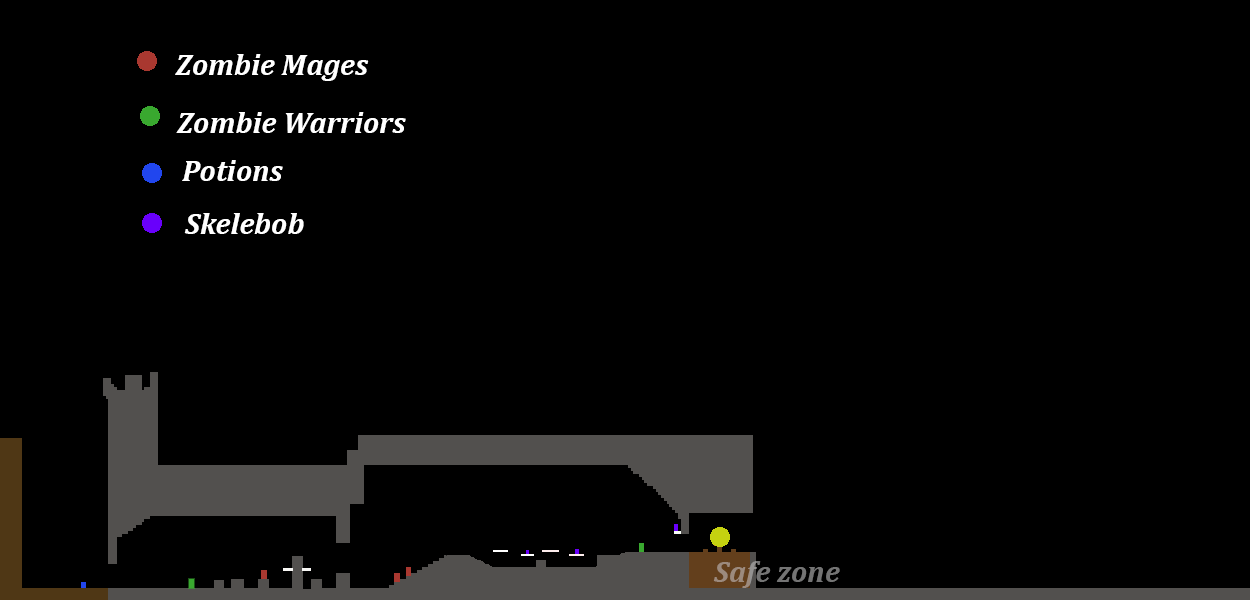
<style>
.page{position:relative;width:1250px;height:600px;background:#000000}
.page>*{position:absolute;margin:0}
.t1{font:30px "Cambria-BoldItalic";color:#ffffff}
.t2{font:30px "Cambria-BoldItalic"}
</style>
<div class="page">
<p class="t1" style="left:175px;top:54px;width:194px;height:27px">Zombie Mages</p>
<p class="t1" style="left:176px;top:112px;width:230px;height:21px">Zombie Warriors</p>
<p class="t1" style="left:182px;top:160px;width:101px;height:21px">Potions</p>
<p class="t1" style="left:184px;top:213px;width:120px;height:21px">Skelebob</p>
<p class="t2" style="left:713px;top:561px;width:127px;height:27px">Safe zone</p>
</div>
